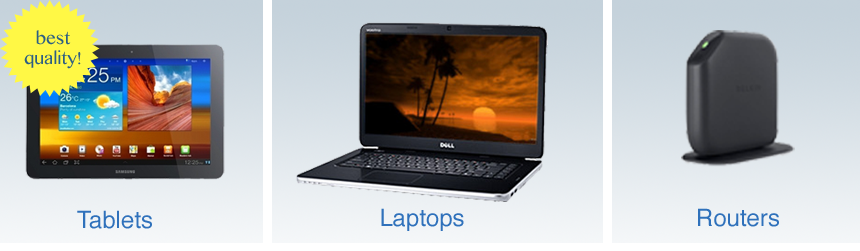
<style>
.page{position:relative;width:860px;height:251px}
.page>*{position:absolute;margin:0}
.t1{font:17.3px "MalayalamMN";color:#2d5f83}
.t2{font:24px "Helvetica";color:#2f71bb}
</style>
<div class="page">
<p class="t1" style="left:24px;top:30px;width:57px;height:39px;text-align:center">best<br>quality!</p>
<p class="t2" style="left:381px;top:208px;width:83px;height:23px">Laptops</p>
<p class="t2" style="left:698px;top:208px;width:81px;height:19px">Routers</p>
<p class="t2" style="left:77px;top:210px;width:75px;height:19px">Tablets</p>
</div>
